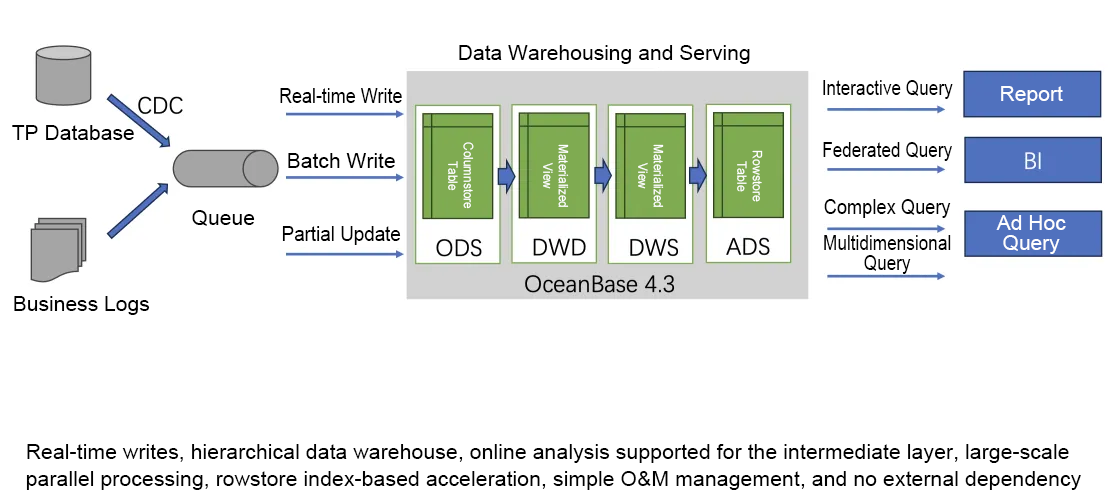
<style>
.page{position:relative;width:1120px;height:501px;background:#ffffff}
.page>*{position:absolute;margin:0}
.t1{font:21.1px "ArialMT";color:#000000}
.t2{font:21.1px "ArialMT";color:#000000;scale:0.85 1}
.t3{font:21.1px "ArialMT";color:#000000;scale:0.82 1}
.t4{font:21.1px "ArialMT";color:#fefefe}
.t5{font:13.1px/15.5px "ArialMT";color:#ffffff;scale:0.9 1}
.t6{font:13.1px/15.5px "ArialMT";color:#ffffff;scale:0.91 1}
.t7{font:13.1px/15.5px "ArialMT";color:#ffffff;scale:0.94 1}
.t8{font:21.1px "ArialMT";color:#000000;scale:0.87 1}
.t9{font:21.1px/20.2px "ArialMT";color:#fefefe}
.t10{font:21.1px "ArialMT";color:#000000;scale:0.89 1}
.t11{font:21.1px/20.3px "ArialMT";color:#000000;scale:0.82 1}
.t12{font:21.4px/27px "ArialMT";color:#000000}
</style>
<div class="page">
<p class="t1" style="left:459px;top:45px;width:291px;height:19px">Data Warehousing and Serving</p>
<p class="t2" style="left:280px;top:88px;width:122px;height:15px">Real-time Write</p>
<p class="t3" style="left:823px;top:80px;width:130px;height:19px">Interactive Query</p>
<p class="t4" style="left:1001px;top:86px;width:62px;height:19px">Report</p>
<p class="t1" style="left:12px;top:125px;width:122px;height:15px">TP Database</p>
<p class="t5" style="left:448px;top:142px;width:26px;height:67px;text-align:center;rotate:90deg">Columnstore<br>Table</p>
<p class="t6" style="left:543px;top:144px;width:26px;height:63px;text-align:center;rotate:90deg">Materialized<br>View</p>
<p class="t6" style="left:638px;top:144px;width:26px;height:63px;text-align:center;rotate:90deg">Materialized<br>View</p>
<p class="t7" style="left:737px;top:150px;width:26px;height:52px;text-align:center;rotate:90deg">Rowstore<br>Table</p>
<p class="t3" style="left:823px;top:142px;width:129px;height:19px">Federated Query</p>
<p class="t1" style="left:288px;top:153px;width:107px;height:15px">Batch Write</p>
<p class="t8" style="left:824px;top:199px;width:127px;height:19px">Complex Query</p>
<p class="t1" style="left:192px;top:210px;width:63px;height:16px">Queue</p>
<p class="t9" style="left:996px;top:215px;width:70px;height:39px;text-align:center">Ad Hoc<br>Query</p>
<p class="t10" style="left:282px;top:226px;width:119px;height:19px">Partial Update</p>
<p class="t11" style="left:824px;top:235px;width:127px;height:39px;text-align:center">Multidimensional<br>Query</p>
<p class="t1" style="left:14px;top:296px;width:136px;height:19px">Business Logs</p>
<p class="t12" style="left:26px;top:444px;width:1055px;height:46px">Real-time writes, hierarchical data warehouse, online analysis supported for the intermediate layer, large-scale parallel processing, rowstore index-based acceleration, simple O&amp;M management, and no external dependency</p>
</div>
